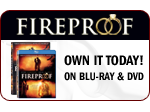
<style>
.page{position:relative;width:150px;height:112px;background:#ffffff}
.page>*{position:absolute;margin:0}
.t1{font:10.8px/15.7px "ITCFranklinGothicStd-DmCd";color:#000000}
.t2{font:14.2px/0.7px "ITCFranklinGothicStd-DmCd";color:#000000}
</style>
<div class="page">
<p class="t1" style="left:64px;top:55px;width:80px;height:26px;text-align:center"><span class="t2">OWN IT TODAY!<br></span>ON BLU-RAY &amp; DVD</p>
</div>
